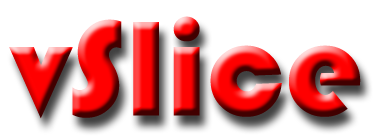
<style>
.page{position:relative;width:375px;height:136px;background:#ffffff}
.page>*{position:absolute;margin:0}
.t1{font:140px "Bauhaus93"}
</style>
<div class="page">
<p class="t1" style="left:9px;top:16px;width:352px;height:103px">vSlice</p>
</div>
